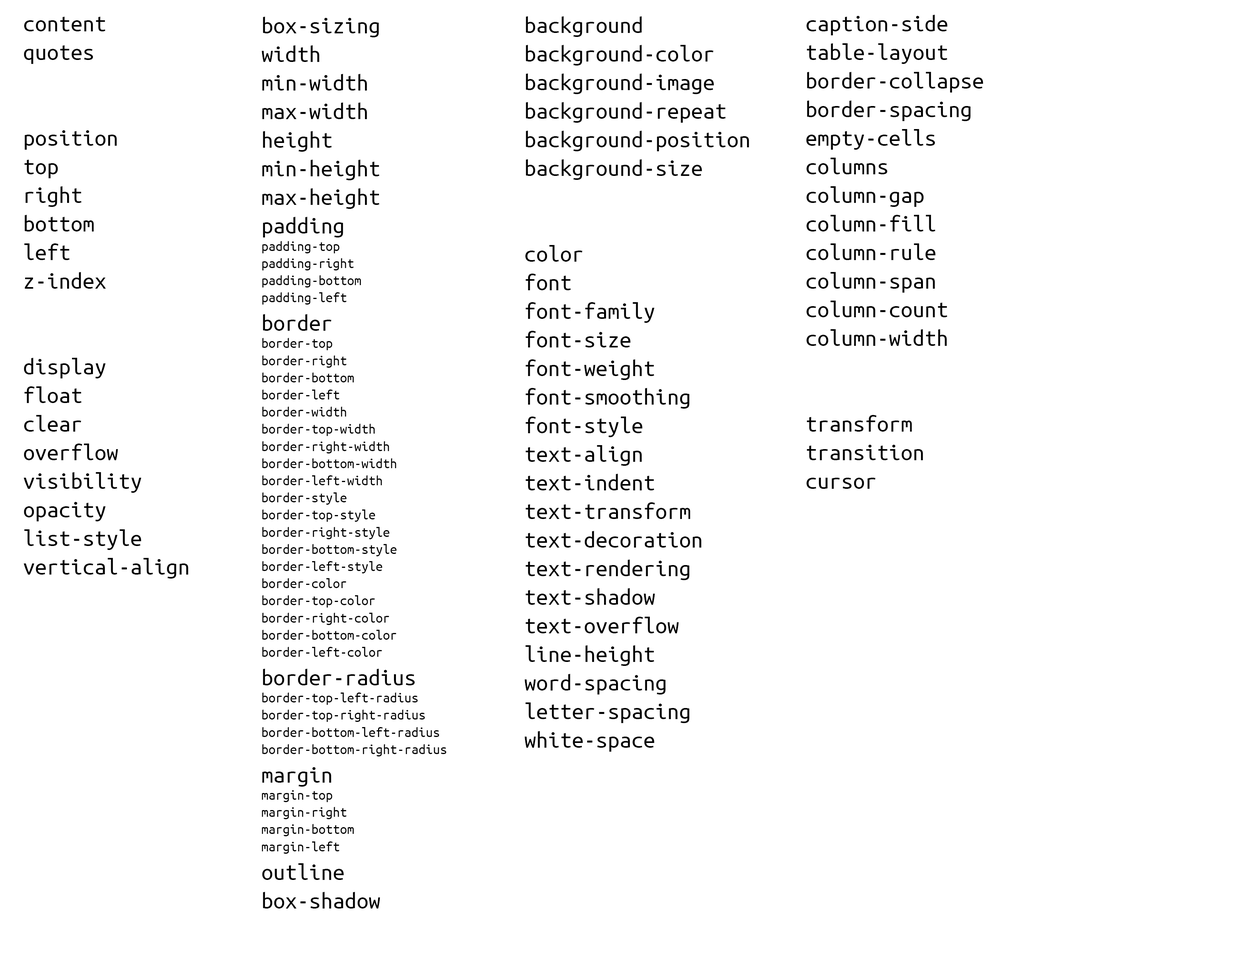
<style>
.page{position:relative;width:1251px;height:953px;background:#ffffff}
.page>*{position:absolute;margin:0}
.t1{font:23.8px "UbuntuMono-Regular";color:#000000}
.t2{font:14.3px "UbuntuMono-Regular";color:#000000}
</style>
<div class="page">
<p class="t1" style="left:23px;top:17px;width:165px;height:562px">content<br>quotes<br><br><br>position<br>top<br>right<br>bottom<br>left<br>z-index<br><br><br>display<br>float<br>clear<br>overflow<br>visibility<br>opacity<br>list-style<br>vertical-align</p>
<p class="t2" style="left:262px;top:17px;width:184px;height:892px"><span class="t1">box-sizing<br>width<br>min-width<br>max-width<br>height<br>min-height<br>max-height<br>padding<br></span>padding-top<br>padding-right<br>padding-bottom<br>padding-left<br><span class="t1">border<br></span>border-top<br>border-right<br>border-bottom<br>border-left<br>border-width<br>border-top-width<br>border-right-width<br>border-bottom-width<br>border-left-width<br>border-style<br>border-top-style<br>border-right-style<br>border-bottom-style<br>border-left-style<br>border-color<br>border-top-color<br>border-right-color<br>border-bottom-color<br>border-left-color<br><span class="t1">border-radius<br></span>border-top-left-radius<br>border-top-right-radius<br>border-bottom-left-radius<br>border-bottom-right-radius<br><span class="t1">margin<br></span>margin-top<br>margin-right<br>margin-bottom<br>margin-left<br><span class="t1">outline<br>box-shadow</span></p>
<p class="t1" style="left:525px;top:16px;width:224px;height:736px">background<br>background-color<br>background-image<br>background-repeat<br>background-position<br>background-size<br><br><br>color<br>font<br>font-family<br>font-size<br>font-weight<br>font-smoothing<br>font-style<br>text-align<br>text-indent<br>text-transform<br>text-decoration<br>text-rendering<br>text-shadow<br>text-overflow<br>line-height<br>word-spacing<br>letter-spacing<br>white-space</p>
<p class="t1" style="left:806px;top:15px;width:177px;height:474px">caption-side<br>table-layout<br>border-collapse<br>border-spacing<br>empty-cells<br>columns<br>column-gap<br>column-fill<br>column-rule<br>column-span<br>column-count<br>column-width<br><br><br>transform<br>transition<br>cursor</p>
</div>
